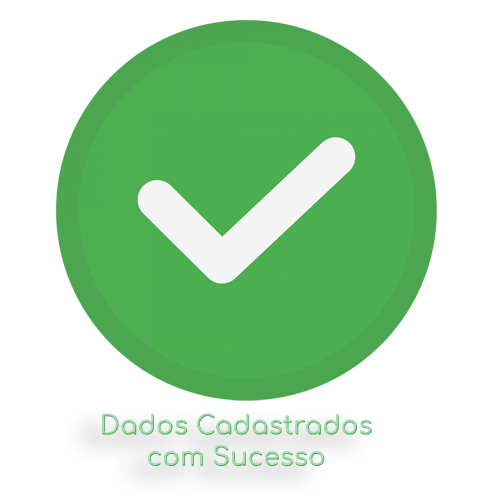
<style>
.page{position:relative;width:500px;height:500px;background:#ffffff}
.page>*{position:absolute;margin:0}
.t1{font:26.2px "Comfortaa-SemiBold"}
</style>
<div class="page">
<p class="t1" style="left:102px;top:413px;width:270px;height:54px;text-align:center">Dados Cadastrados<br>com Sucesso</p>
<p class="t1" style="left:102px;top:413px;width:270px;height:54px;text-align:center">Dados Cadastrados<br>com Sucesso</p>
</div>
